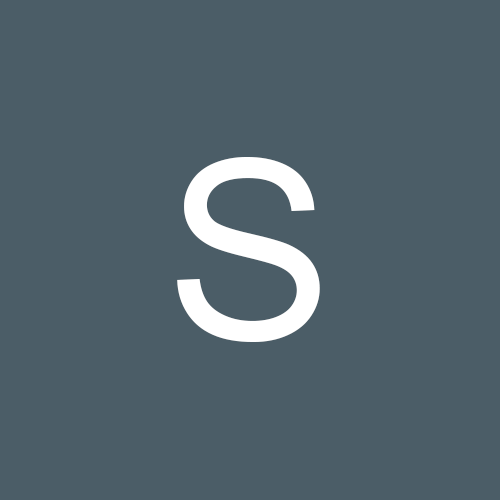
<style>
.page{position:relative;width:500px;height:500px;background:#4b5d67}
.page>*{position:absolute;margin:0}
.t1{font:250px "ArialMT";color:#ffffff}
</style>
<div class="page">
<p class="t1" style="left:177px;top:157px;width:143px;height:185px">S</p>
</div>
